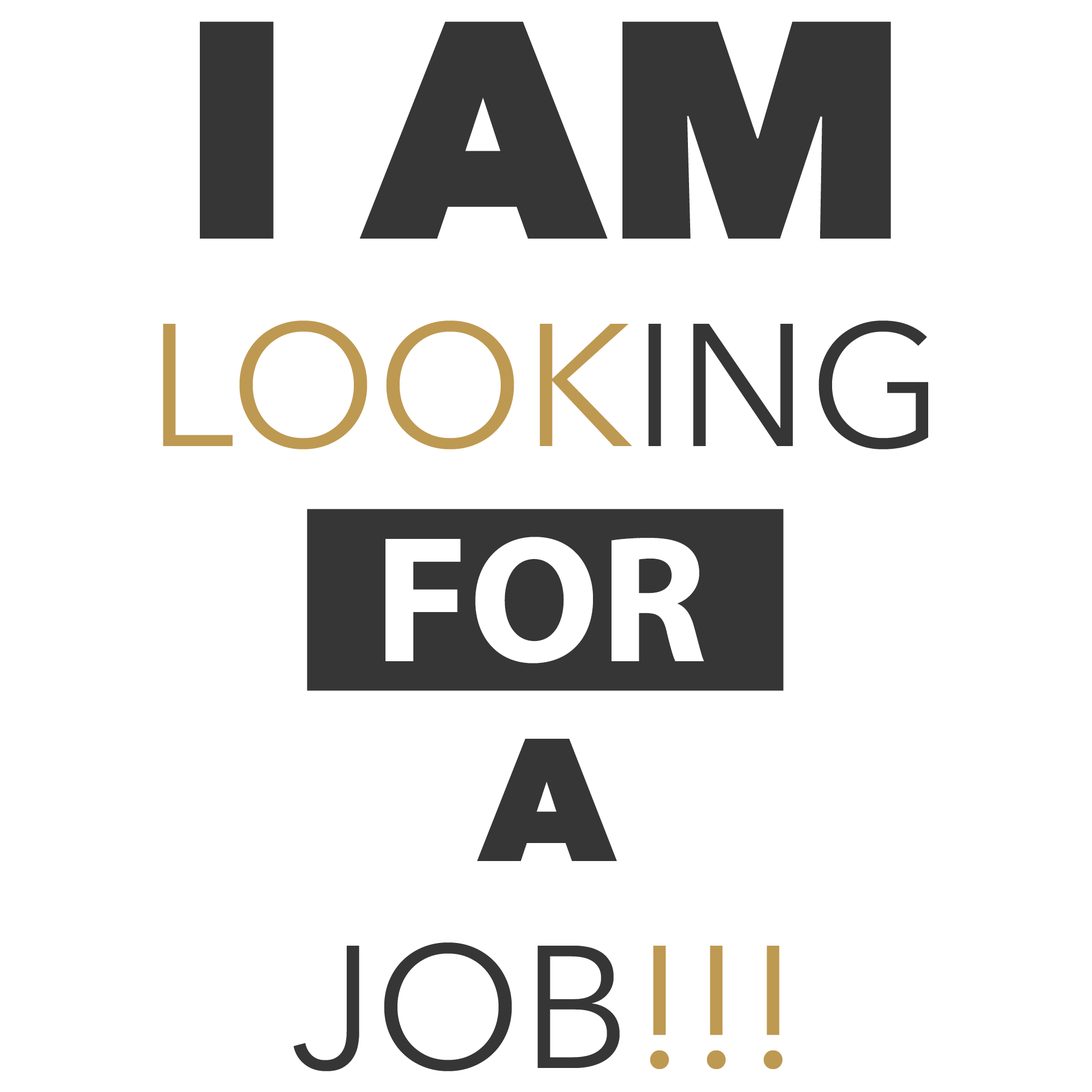
<style>
.page{position:relative;width:1092px;height:1092px;background:#ffffff}
.page>*{position:absolute;margin:0}
.t1{font:306.4px "AvenirNext-Heavy";color:#363636}
.t2{font:172.8px "AvenirNext-Regular";color:#be9952}
.t3{font:172.8px "AvenirNext-Regular";color:#363636}
.t4{font:172.8px "AvenirNext-Heavy";color:#363636}
.t5{font:181.5px "MyriadPro-Bold";color:#ffffff}
</style>
<div class="page">
<p class="t1" style="left:163px;top:21px;width:765px;height:1050px;text-align:center">I AM<br><span class="t2">LOOK</span><span class="t3">ING<br><br></span><span class="t4">A<br></span><span class="t3">JOB</span><span class="t2">!!!</span></p>
<p class="t5" style="left:385px;top:537px;width:319px;height:126px">FOR</p>
</div>
